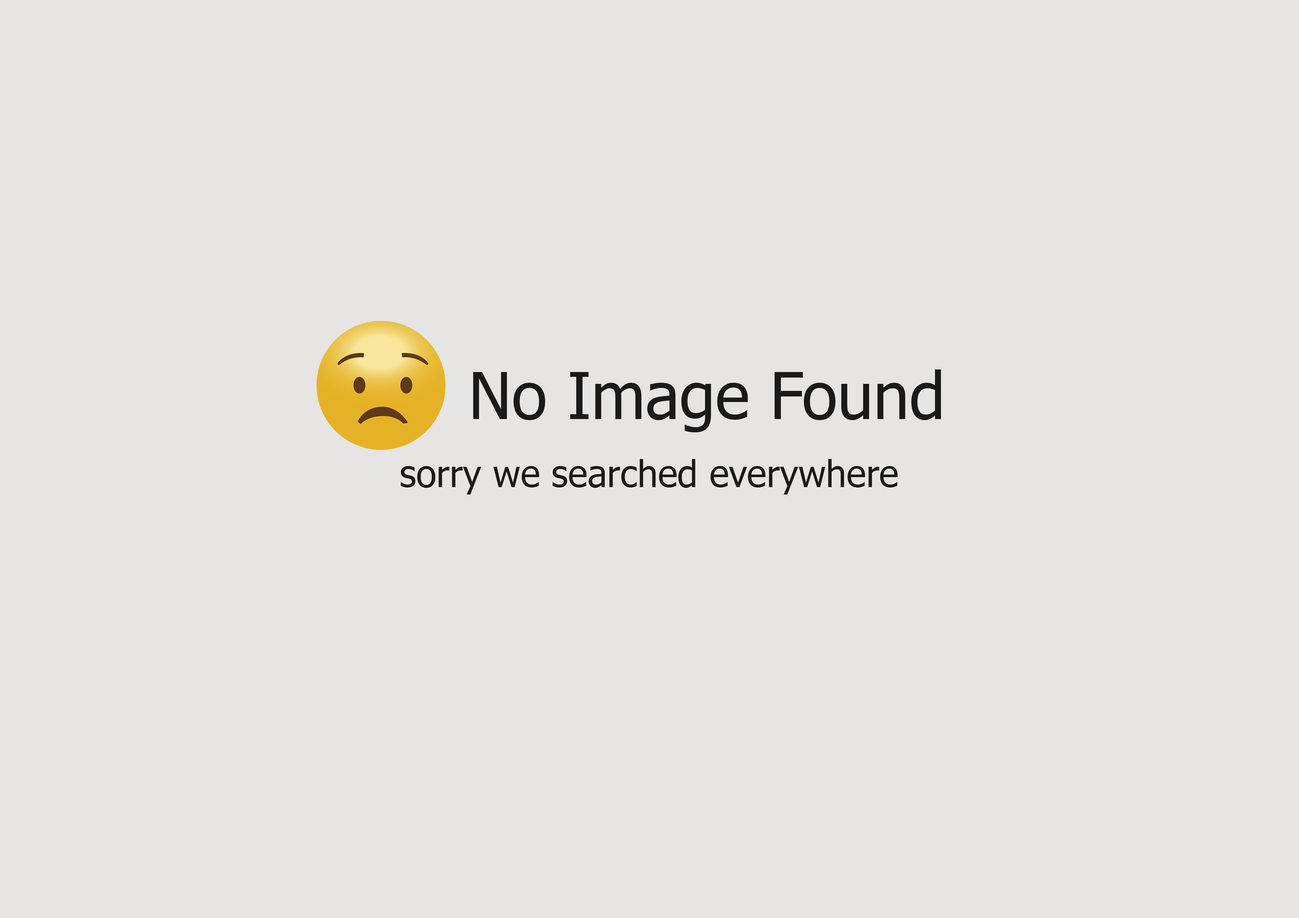
<style>
.page{position:relative;width:1299px;height:918px;background:#e6e5e4}
.page>*{position:absolute;margin:0}
.t1{font:64.8px "Tahoma";color:#1a1a1a}
.t2{font:37px "Tahoma";color:#1a1a1a}
</style>
<div class="page">
<p class="t1" style="left:473px;top:369px;width:468px;height:63px">No Image Found</p>
<p class="t2" style="left:401px;top:459px;width:496px;height:36px">sorry we searched everywhere</p>
</div>
